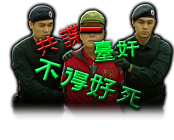
<style>
.page{position:relative;width:174px;height:140px;background:#ffffff}
.page>*{position:absolute;margin:0}
.t1{font:26.3px "FZZJ-MSHLFW"}
.t2{font:24.6px "FZZJ-MSHLFW"}
.t3{font:28.6px "FZZJ-MSHLFW"}
</style>
<div class="page">
<p class="t1" style="left:36px;top:24px;width:51px;height:34px;rotate:-23deg">共谍</p>
<p class="t2" style="left:94px;top:40px;width:46px;height:22px;rotate:-5deg">台奸</p>
<p class="t3" style="left:35px;top:58px;width:107px;height:52px;rotate:18deg">不得好死</p>
</div>
